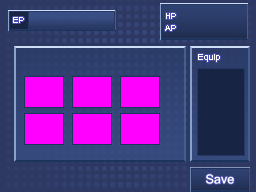
<style>
.page{position:relative;width:256px;height:192px;background:#2d3963}
.page>*{position:absolute;margin:0}
.t1{font:14px "Kartika";color:#ffffff}
.t2{font:20px "Kartika";color:#ffffff}
</style>
<div class="page">
<p class="t1" style="left:13px;top:17px;width:11px;height:6px">EP</p>
<p class="t1" style="left:166px;top:13px;width:10px;height:6px">HP</p>
<p class="t1" style="left:165px;top:25px;width:11px;height:6px">AP</p>
<p class="t1" style="left:198px;top:54px;width:22px;height:8px">Equip</p>
<p class="t2" style="left:206px;top:174px;width:28px;height:10px">Save</p>
</div>
